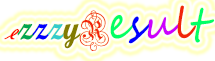
<style>
.page{position:relative;width:215px;height:61px}
.page>*{position:absolute;margin:0}
.t1{font:36px "VladimirScript";color:#ff0000;scale:0.88 1}
.t2{font:36px "ScriptMTBold";color:#00a651;scale:0.88 1}
.t3{font:36px "ScriptMTBold";color:#0000ff;scale:0.88 1}
.t4{font:36px "ScriptMTBold";color:#33cccc;scale:0.88 1}
.t5{font:36px "ScriptMTBold";color:#827b00;scale:0.88 1}
.t6{font:43.9px "Parchment-Regular";color:#f1260b;scale:0.88 1}
.t7{font:43.9px "SegoeScript";color:#00ff66;scale:0.88 1}
.t8{font:43.9px "SegoeScript";color:#0000ff;scale:0.88 1}
.t9{font:43.9px "SegoeScript";color:#cc00ff;scale:0.88 1}
.t10{font:43.9px "SegoeScript";color:#f1260b;scale:0.88 1}
</style>
<div class="page">
<p class="t1" style="left:4px;top:5px;width:211px;height:46px">e<span class="t2">z</span><span class="t3">z</span><span class="t4">z</span><span class="t5">y</span><span class="t6">R</span><span class="t7">e</span><span class="t8">s</span><span class="t9">u</span><span class="t10">l</span><span class="t7">t</span></p>
</div>
